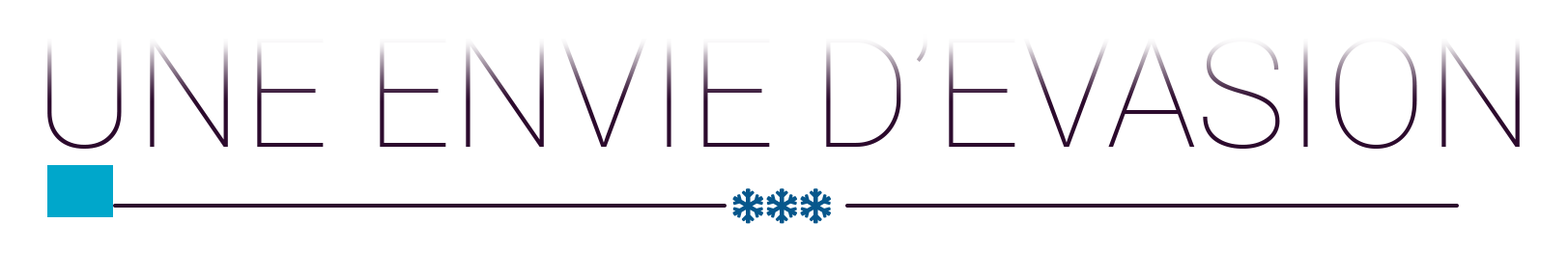
<style>
.page{position:relative;width:1568px;height:279px;background:#ffffff}
.page>*{position:absolute;margin:0}
.t1{font:151.6px "Roboto-Thin";color:#2c0a2d}
</style>
<div class="page">
<p class="t1" style="left:47px;top:33px;width:1473px;height:116px">UNE ENVIE D’EVASION</p>
</div>
